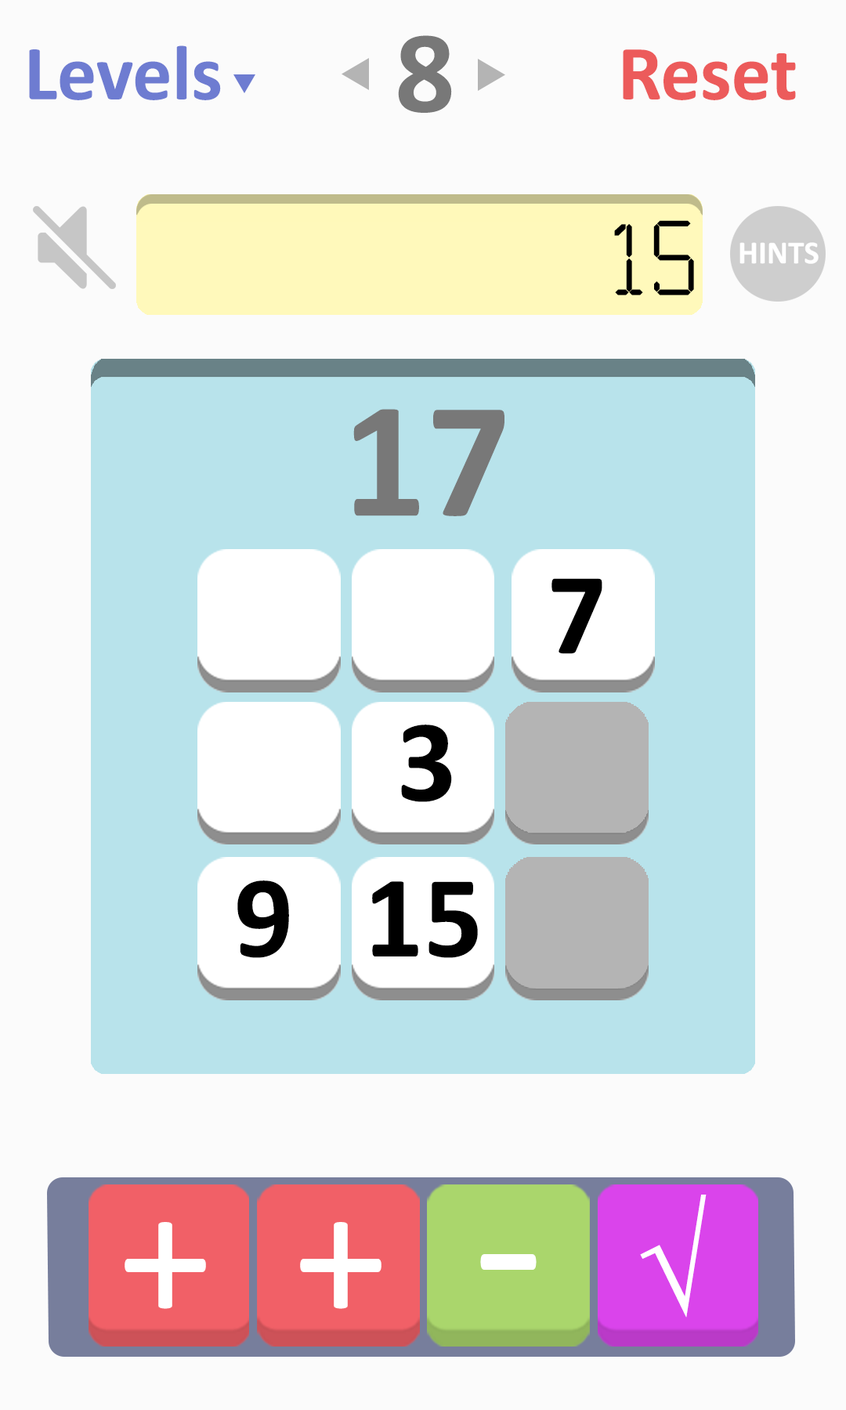
<style>
.page{position:relative;width:846px;height:1410px;background:#fbfbfb}
.page>*{position:absolute;margin:0}
.t1{font:117.6px "Calibri-Bold";color:#787878}
.t2{font:78.3px "Calibri-Bold";color:#6e7cd1}
.t3{font:78.3px "Calibri-Bold";color:#ec5b5b}
.t4{font:117.5px "Calculator";color:#000000}
.t5{font:166.9px "Calibri-Bold";color:#787878}
.t6{font:117.6px "Calibri-Bold";color:#000000}
.t7{font:128.7px "TimesNewRomanPSMT";color:#ffffff}
.t8{font:188.3px "Calibri";color:#ffffff}
.t9{font:231.5px "Calibri";color:#ffffff}
</style>
<div class="page">
<p class="t1" style="left:398px;top:35px;width:54px;height:78px">8</p>
<p class="t2" style="left:29px;top:45px;width:192px;height:55px">Levels</p>
<p class="t3" style="left:623px;top:49px;width:173px;height:51px">Reset</p>
<p class="t4" style="left:614px;top:220px;width:80px;height:75px">15</p>
<p class="t5" style="left:353px;top:409px;width:151px;height:107px">17</p>
<p class="t6" style="left:551px;top:578px;width:51px;height:76px">7</p>
<p class="t6" style="left:401px;top:724px;width:51px;height:78px">3</p>
<p class="t6" style="left:237px;top:880px;width:52px;height:78px">9</p>
<p class="t6" style="left:372px;top:881px;width:106px;height:77px">15</p>
<p class="t7" style="left:640px;top:1194px;width:66px;height:123px">√</p>
<p class="t8" style="left:125px;top:1222px;width:81px;height:87px">+</p>
<p class="t8" style="left:300px;top:1222px;width:81px;height:87px">+</p>
<p class="t9" style="left:480px;top:1254px;width:56px;height:16px">-</p>
</div>
